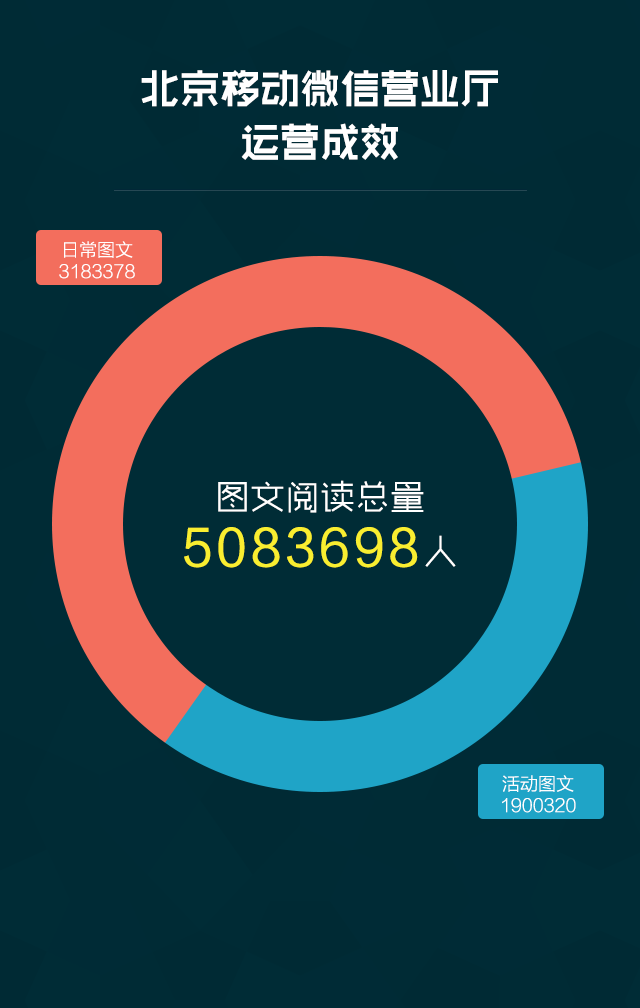
<style>
.page{position:relative;width:640px;height:1008px;background:#002c36}
.page>*{position:absolute;margin:0}
.t1{font:40px/53.5px "RTWSShangGoG0v1-Bold";color:#ffffff}
.t2{font:18px "FZLTKHK--GBK1-0";color:#ffffff}
.t3{font:50px/55px "FZLTHK--GBK1-0";letter-spacing:0.08em;color:#f9ee30}
.t4{font:35px/55px "RTWSShangGoG0v1-Light";color:#ffffff}
.t5{font:35px/55px "RTWSShangGoG0v1-Light";letter-spacing:0.08em;color:#ffffff}
</style>
<div class="page">
<p class="t1" style="left:141px;top:70px;width:357px;height:90px;text-align:center">北京移动微信营业厅<br>运营成效</p>
<p class="t2" style="left:59px;top:241px;width:76px;height:38px;text-align:center">日常图文<br>3183378</p>
<p class="t3" style="left:184px;top:480px;width:272px;height:88px;text-align:center"><span class="t4">图文阅读总量<br></span>5083698<span class="t5">人</span></p>
<p class="t2" style="left:502px;top:775px;width:74px;height:38px;text-align:center">活动图文<br>1900320</p>
</div>
